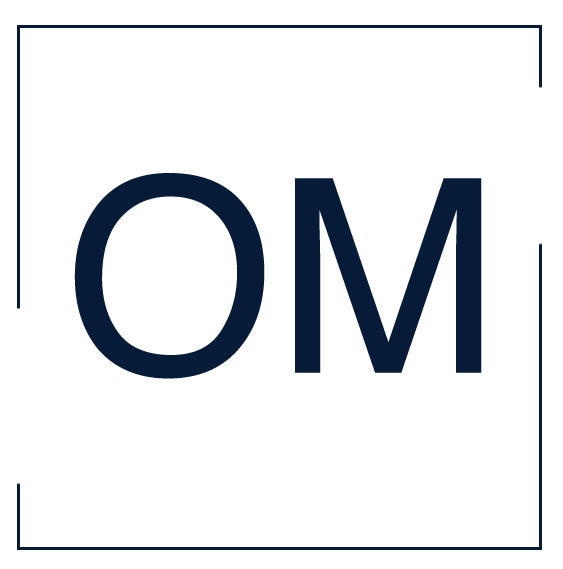
<style>
.page{position:relative;width:563px;height:569px;background:#ffffff}
.page>*{position:absolute;margin:0}
.t1{font:270.7px "Helvetica";color:#061b38}
</style>
<div class="page">
<p class="t1" style="left:74px;top:173px;width:408px;height:206px">OM</p>
</div>
